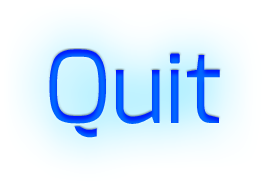
<style>
.page{position:relative;width:270px;height:188px;background:#ffffff}
.page>*{position:absolute;margin:0}
.t1{font:100px "Exo-Regular";color:#0066ff}
</style>
<div class="page">
<p class="t1" style="left:49px;top:49px;width:171px;height:89px">Quit</p>
</div>
